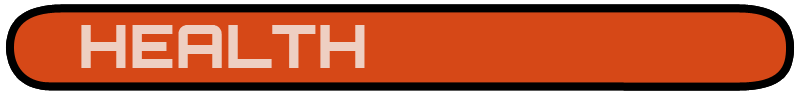
<style>
.page{position:relative;width:800px;height:95px;background:#d64817}
.page>*{position:absolute;margin:0}
.t1{font:59.8px "Orbitron-Black";color:#eecfc2}
</style>
<div class="page">
<p class="t1" style="left:81px;top:25px;width:284px;height:43px">HEALTH</p>
<p class="t1" style="left:81px;top:25px;width:284px;height:43px">HEALTH</p>
</div>
